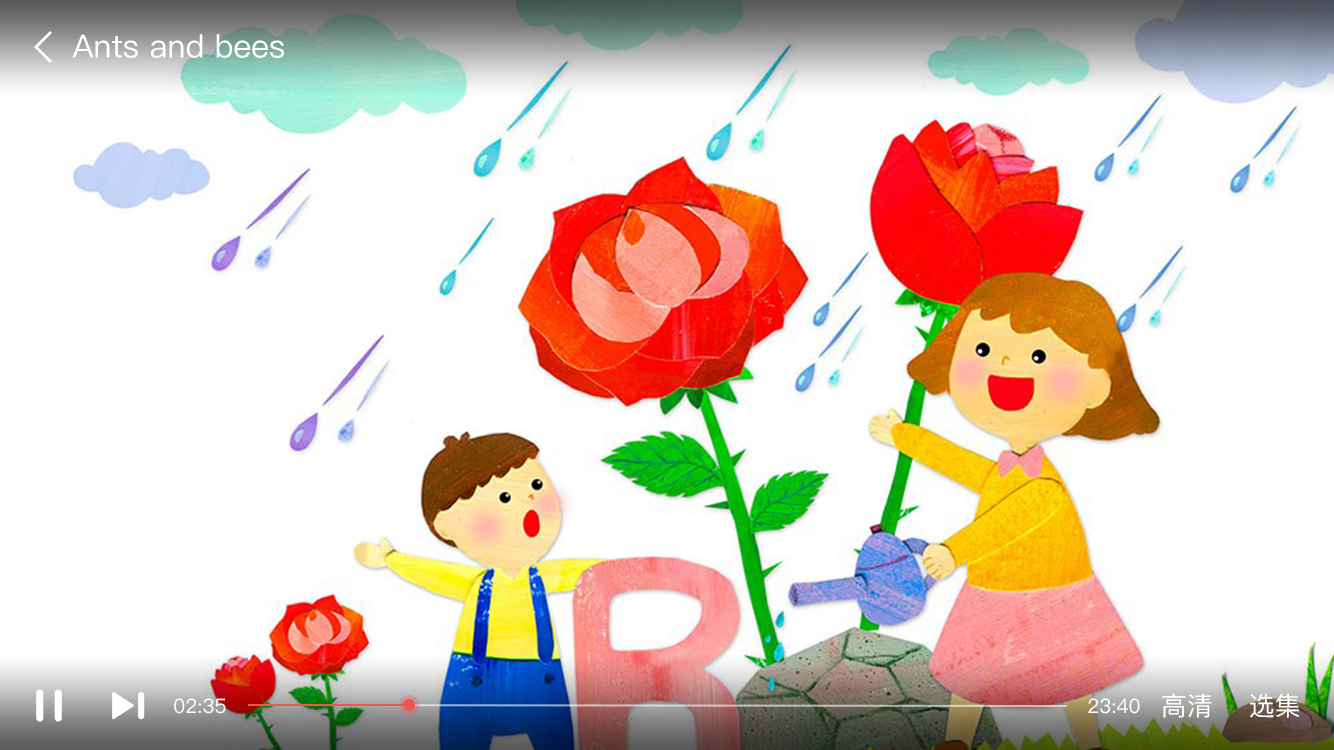
<style>
.page{position:relative;width:1334px;height:750px;background:#ffffff}
.page>*{position:absolute;margin:0}
.t1{font:32px "PingFangSC-Regular";color:#ffffff}
.t2{font:20px "PingFangSC-Regular";color:#ffffff}
.t3{font:26px "PingFangSC-Regular";color:#ffffff}
</style>
<div class="page">
<p class="t1" style="left:72px;top:34px;width:213px;height:24px">Ants and bees</p>
<p class="t2" style="left:174px;top:698px;width:52px;height:16px">02:35</p>
<p class="t2" style="left:1088px;top:698px;width:52px;height:16px">23:40</p>
<p class="t3" style="left:1162px;top:693px;width:50px;height:25px">高清</p>
<p class="t3" style="left:1250px;top:693px;width:50px;height:25px">选集</p>
</div>
